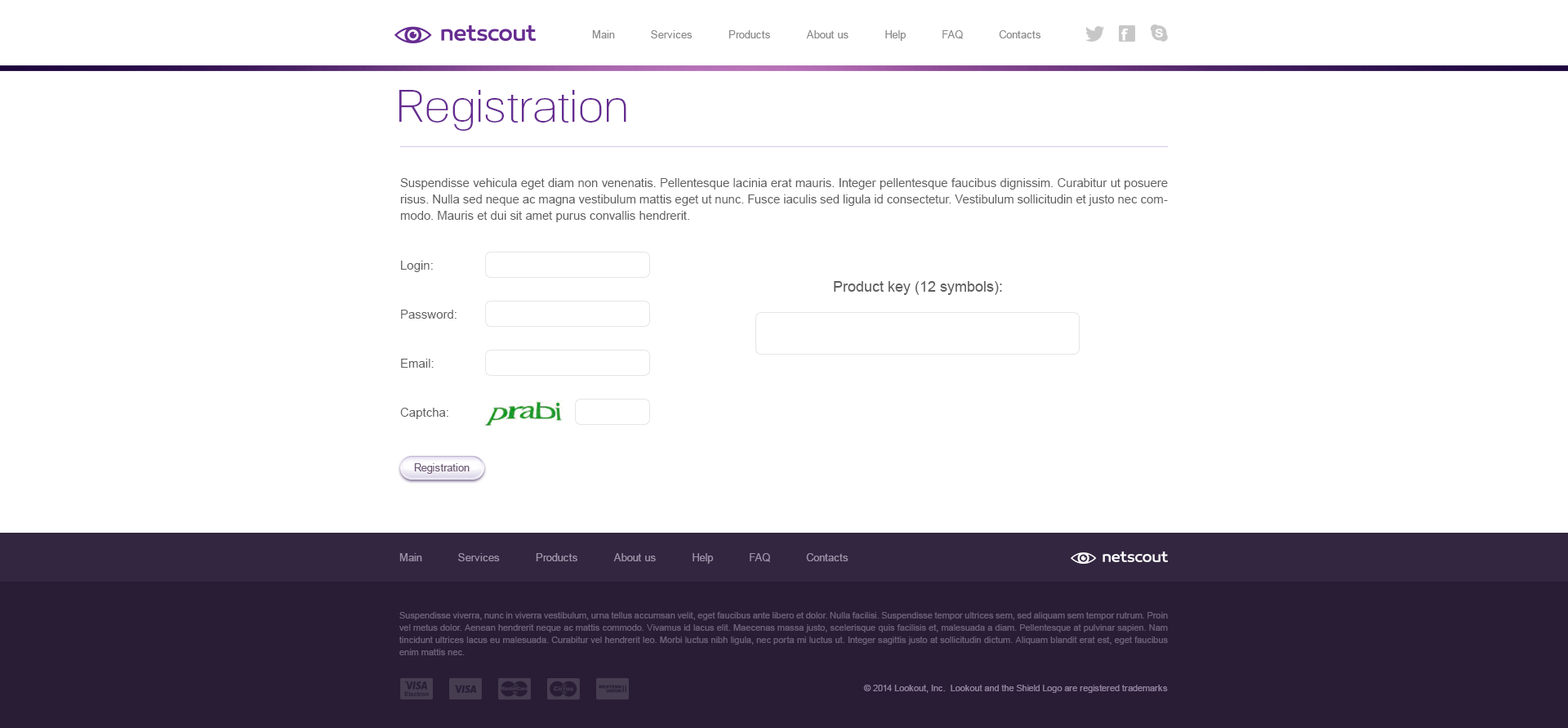
<style>
.page{position:relative;width:1568px;height:728px;background:#ffffff}
.page>*{position:absolute;margin:0}
.t1{font:10.6px "ArialMT";color:#8a8a8a}
.t2{font:44.9px "NeoGram-Light";color:#662c91}
.t3{font:12.2px/16.3px "ArialMT";color:#5f5f5f}
.t4{font:14.7px "ArialMT";color:#5f5f5f}
.t5{font:10.6px "ArialMT";color:#6d5976}
.t6{font:10.6px "ArialMT";color:#9c91a7}
.t7{font:9px/12.2px "ArialMT";color:#6c6078}
.t8{font:9px "ArialMT";color:#9182a0}
</style>
<div class="page">
<p class="t1" style="left:592px;top:30px;width:449px;height:11px">Main           Services           Products           About us           Help           FAQ           Contacts</p>
<p class="t2" style="left:399px;top:90px;width:227px;height:41px">Registration</p>
<p class="t3" style="left:400px;top:178px;width:768px;height:44px;text-align:justify">Suspendisse vehicula eget diam non venenatis. Pellentesque lacinia erat mauris. Integer pellentesque faucibus dignissim. Curabitur ut posuere risus. Nulla sed neque ac magna vestibulum mattis eget ut nunc. Fusce iaculis sed ligula id consectetur. Vestibulum sollicitudin et justo nec commodo. Mauris et dui sit amet purus convallis hendrerit.</p>
<p class="t3" style="left:400px;top:261px;width:57px;height:158px;text-align:justify">Login:<br><br><br>Password:<br><br><br>Email:<br><br><br>Captcha:</p>
<p class="t4" style="left:834px;top:281px;width:168px;height:14px">Product key (12 symbols):</p>
<p class="t5" style="left:414px;top:463px;width:56px;height:11px">Registration</p>
<p class="t6" style="left:399px;top:553px;width:450px;height:11px">Main           Services           Products           About us           Help           FAQ           Contacts</p>
<p class="t7" style="left:399px;top:612px;width:769px;height:43px;text-align:justify">Suspendisse viverra, nunc in viverra vestibulum, urna tellus accumsan velit, eget faucibus ante libero et dolor. Nulla facilisi. Suspendisse tempor ultrices sem, sed aliquam sem tempor rutrum. Proin vel metus dolor. Aenean hendrerit neque ac mattis commodo. Vivamus id lacus elit. Maecenas massa justo, scelerisque quis facilisis et, malesuada a diam. Pellentesque at pulvinar sapien. Nam tincidunt ultrices lacus eu malesuada. Curabitur vel hendrerit leo. Morbi luctus nibh ligula, nec porta mi luctus ut. Integer sagittis justo at sollicitudin dictum. Aliquam blandit erat est, eget faucibus enim mattis nec.</p>
<p class="t8" style="left:863px;top:684px;width:305px;height:9px">© 2014 Lookout, Inc.  Lookout and the Shield Logo are registered trademarks</p>
</div>
